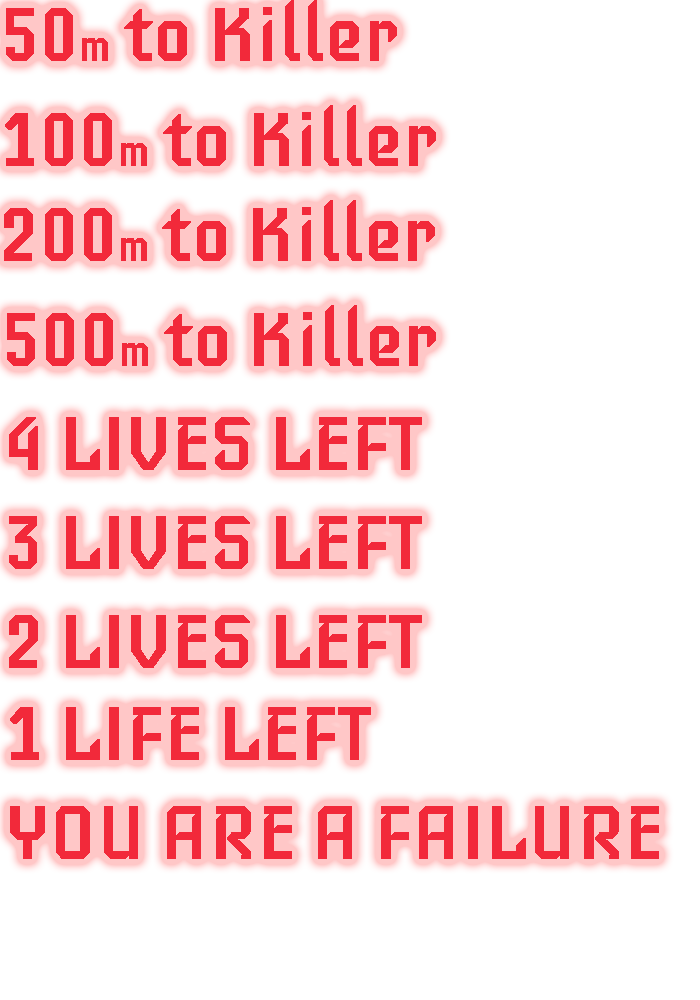
<style>
.page{position:relative;width:700px;height:1000px;background:#ffffff}
.page>*{position:absolute;margin:0}
.t1{font:75px "Iceberg-Regular";color:#f2293a;font-weight:bold}
.t2{font:41.7px "Iceberg-Regular";color:#f2293a;font-weight:bold}
</style>
<div class="page">
<p class="t1" style="left:6px;top:0px;width:391px;height:61px">50<span class="t2">m</span> to Killer</p>
<p class="t1" style="left:5px;top:105px;width:431px;height:61px">100<span class="t2">m</span> to Killer</p>
<p class="t1" style="left:4px;top:200px;width:431px;height:61px">200<span class="t2">m</span> to Killer</p>
<p class="t1" style="left:7px;top:305px;width:429px;height:61px">500<span class="t2">m</span> to Killer</p>
<p class="t1" style="left:9px;top:417px;width:413px;height:53px">4 LIVES LEFT</p>
<p class="t1" style="left:9px;top:516px;width:413px;height:53px">3 LIVES LEFT</p>
<p class="t1" style="left:9px;top:615px;width:413px;height:53px">2 LIVES LEFT</p>
<p class="t1" style="left:10px;top:707px;width:361px;height:53px">1 LIFE LEFT</p>
<p class="t1" style="left:10px;top:806px;width:649px;height:53px">YOU ARE A FAILURE</p>
</div>
